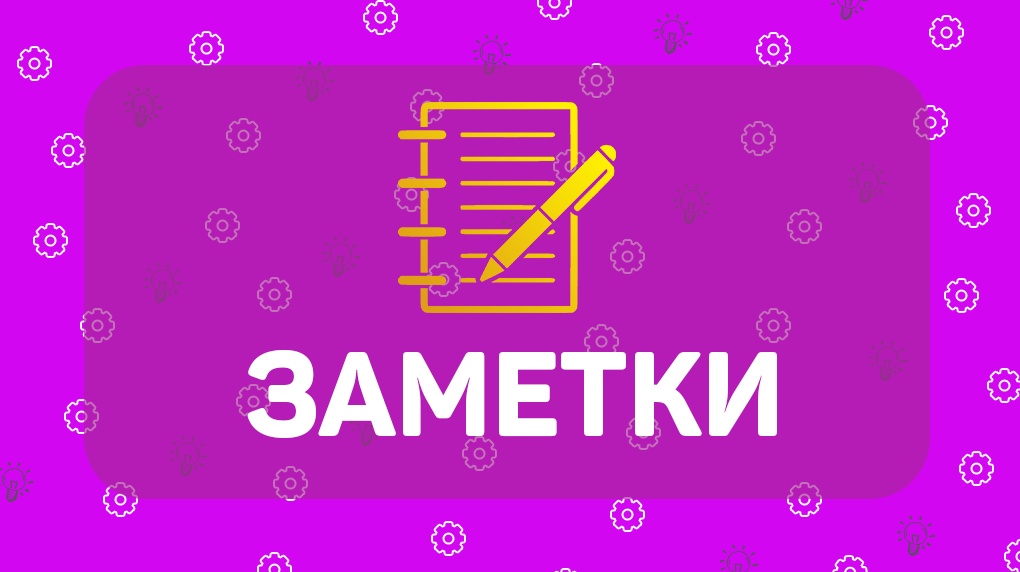
<style>
.page{position:relative;width:1020px;height:572px;background:#b51bb5}
.page>*{position:absolute;margin:0}
.t1{font:118.5px "Panton-ExtraBold";color:#ffffff}
</style>
<div class="page">
<p class="t1" style="left:247px;top:349px;width:530px;height:89px">ЗАМЕТКИ</p>
</div>
